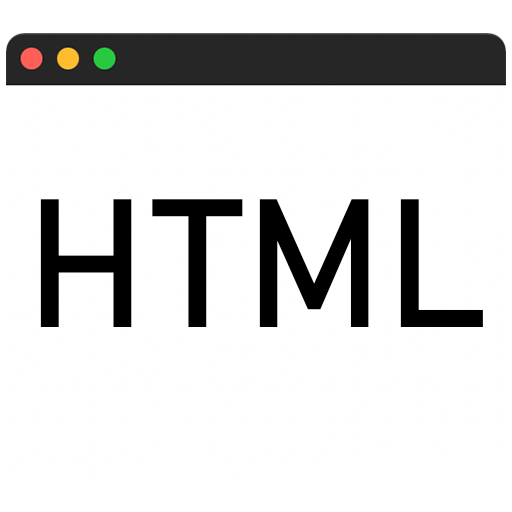
<style>
.page{position:relative;width:512px;height:512px;background:#ffffff}
.page>*{position:absolute;margin:0}
.t1{font:180.4px "Bahnschrift";color:#000000}
</style>
<div class="page">
<p class="t1" style="left:40px;top:199px;width:443px;height:128px">HTML</p>
</div>
